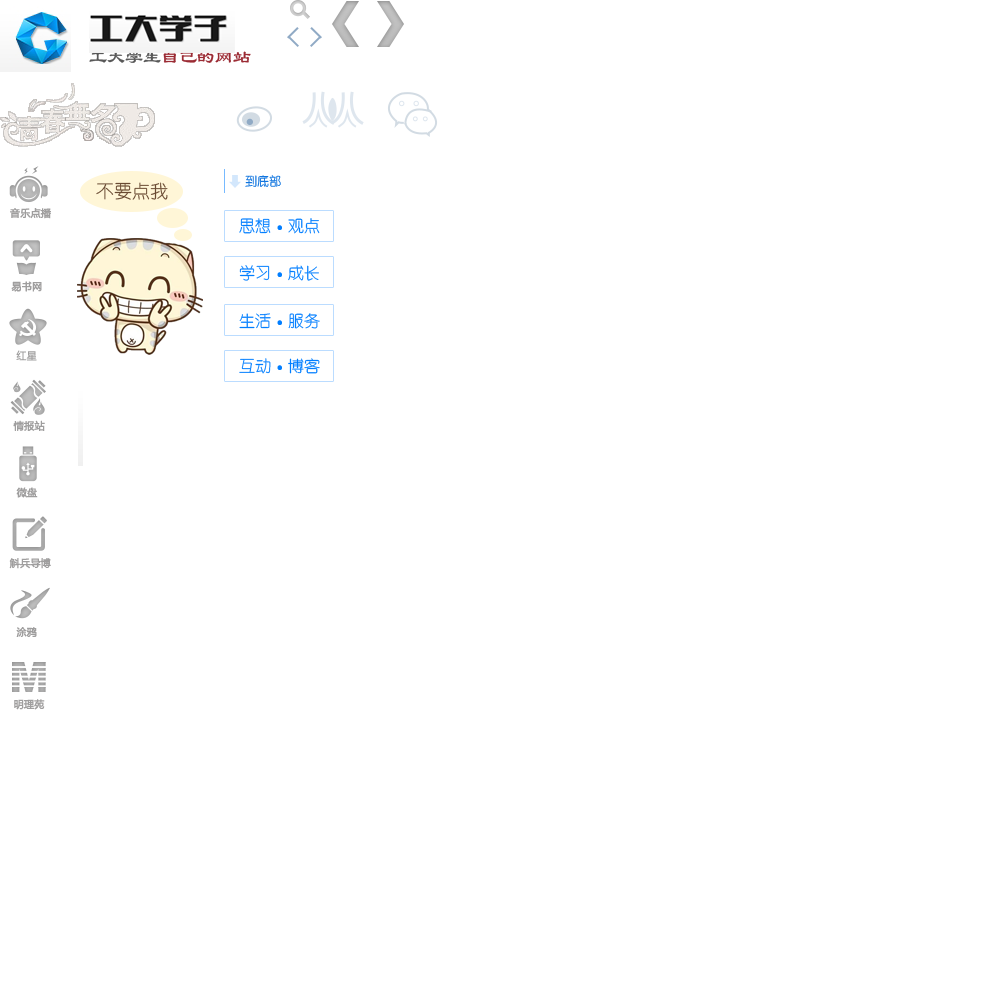
<style>
.page{position:relative;width:1000px;height:1000px;background:#ffffff}
.page>*{position:absolute;margin:0}
.t1{font:18px "LiSu";color:#9b2b34}
.t2{font:18px "LiSu";color:#585858}
.t3{font:18px "YouYuan";color:#694a32}
.t4{font:12px "YouYuan"}
.t5{font:10px "MicrosoftYaHei";color:#9f9e9e;font-weight:bold}
.t6{font:16px "YouYuan";color:#017eff}
.t7{font:9px "YouYuan";color:#017eff}
.t8{font:42px "Arial-Black"}
</style>
<div class="page">
<p class="t1" style="left:89px;top:51px;width:162px;height:12px"><span class="t2">工大学生</span>自己的网站</p>
<p class="t3" style="left:96px;top:182px;width:72px;height:18px">不要点我</p>
<p class="t4" style="left:245px;top:175px;width:36px;height:12px">到底部</p>
<p class="t5" style="left:10px;top:208px;width:41px;height:11px">音乐点播</p>
<p class="t6" style="left:239px;top:218px;width:81px;height:16px">思想<span class="t7">·</span>观点</p>
<p class="t6" style="left:239px;top:265px;width:80px;height:16px">学习<span class="t7">·</span>成长</p>
<p class="t5" style="left:11px;top:281px;width:31px;height:11px">易书网</p>
<p class="t6" style="left:239px;top:313px;width:81px;height:16px">生活<span class="t7">·</span>服务</p>
<p class="t5" style="left:16px;top:350px;width:21px;height:11px">红星</p>
<p class="t6" style="left:239px;top:358px;width:81px;height:16px">互动<span class="t7">·</span>博客</p>
<p class="t5" style="left:13px;top:420px;width:32px;height:11px">情报站</p>
<p class="t5" style="left:16px;top:487px;width:22px;height:11px">微盘</p>
<p class="t5" style="left:9px;top:558px;width:42px;height:11px">斛兵导博</p>
<p class="t5" style="left:16px;top:627px;width:21px;height:10px">涂鸦</p>
<p class="t8" style="left:12px;top:662px;width:34px;height:30px">M</p>
<p class="t5" style="left:14px;top:699px;width:31px;height:11px">明理苑</p>
</div>
